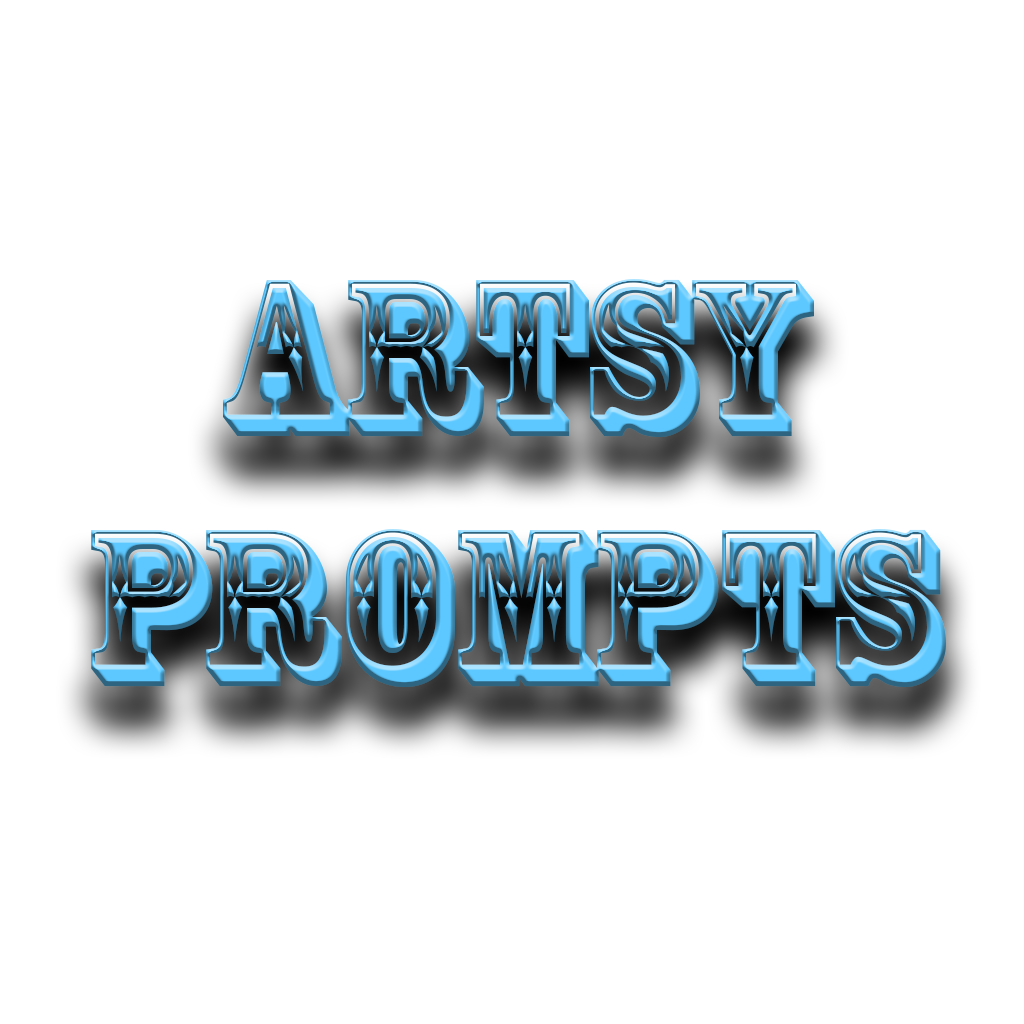
<style>
.page{position:relative;width:1024px;height:1024px;background:#ffffff}
.page>*{position:absolute;margin:0}
.t1{font:207.9px "RosewoodStd-Regular"}
</style>
<div class="page">
<p class="t1" style="left:91px;top:279px;width:855px;height:408px;text-align:center">Artsy<br>Prompts</p>
</div>
